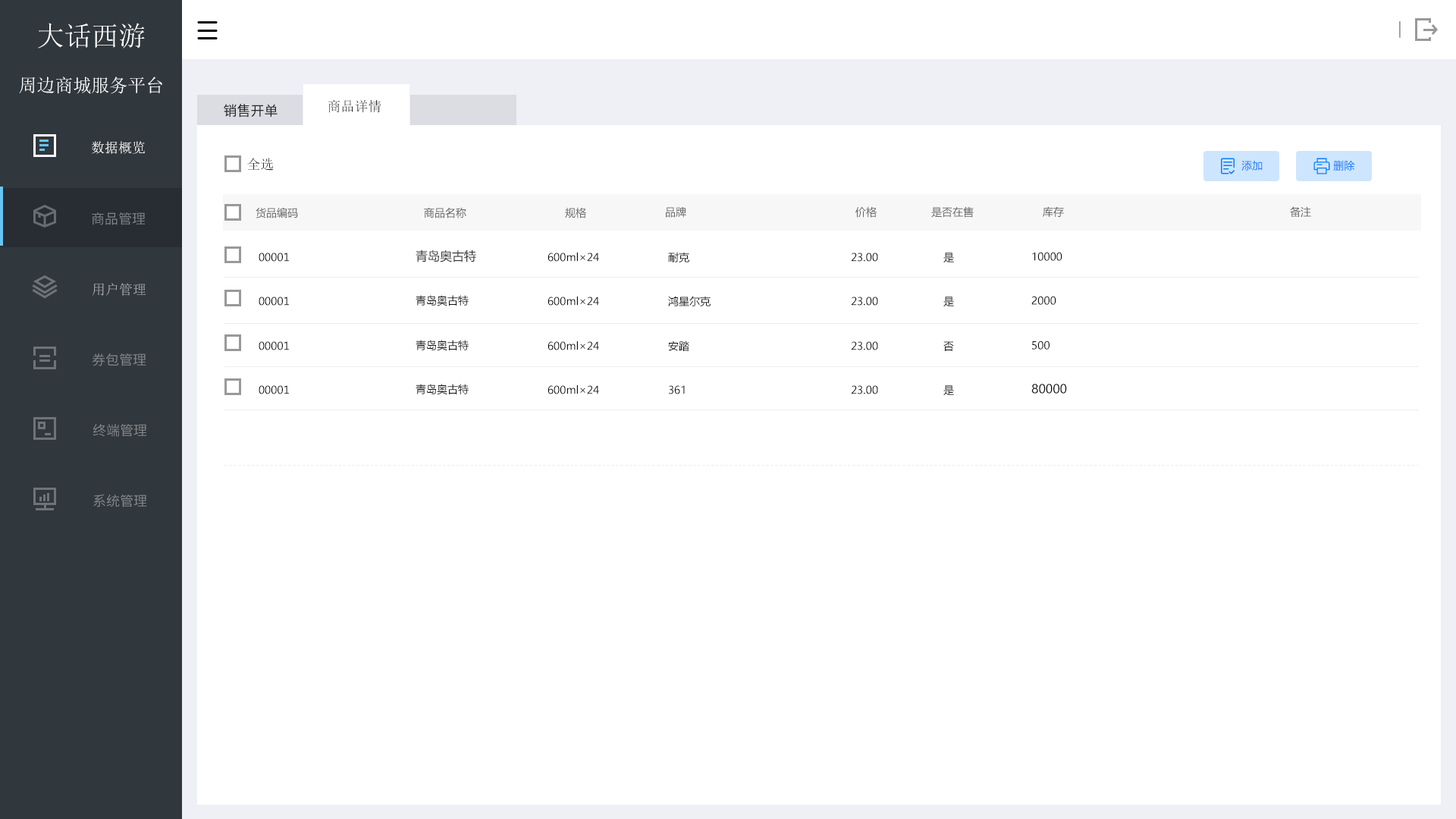
<style>
.page{position:relative;width:1456px;height:819px;background:#ffffff}
.page>*{position:absolute;margin:0}
.t1{font:27.3px "SimSun";color:#ffffff}
.t2{font:18.2px "SourceHanSansCN-Normal";color:#999999}
.t3{font:18.2px "SimSun";color:#ffffff}
.t4{font:13.6px "SimSun";color:#282828}
.t5{font:13.6px "SourceHanSansCN-Regular";color:#282828}
.t6{font:13.6px "SimSun";color:#ffffff}
.t7{font:10.6px "MicrosoftYaHei";color:#097ff9}
.t8{font:10.6px "MicrosoftYaHei";color:#666666}
.t9{font:13.6px "SourceHanSansCN-Normal";color:#828588}
.t10{font:10.6px "MicrosoftYaHei";color:#111111}
.t11{font:12.1px "MicrosoftYaHei";color:#333333}
.t12{font:13.6px "SimSun";color:#adaeb0}
.t13{font:13.6px "SourceHanSansCN-Normal";color:#878a8d}
.t14{font:12.1px "MicrosoftYaHei";color:#111111}
</style>
<div class="page">
<p class="t1" style="left:38px;top:23px;width:107px;height:26px">大话西游</p>
<p class="t2" style="left:1399px;top:21px;width:2px;height:17px">丨</p>
<p class="t3" style="left:19px;top:77px;width:143px;height:17px">周边商城服务平台</p>
<p class="t4" style="left:328px;top:99px;width:53px;height:14px">商品详情</p>
<p class="t5" style="left:224px;top:104px;width:54px;height:14px">销售开单</p>
<p class="t6" style="left:92px;top:141px;width:53px;height:13px">数据概览</p>
<p class="t4" style="left:247px;top:158px;width:27px;height:13px">全选</p>
<p class="t7" style="left:1241px;top:160px;width:22px;height:11px">添加</p>
<p class="t7" style="left:1333px;top:160px;width:22px;height:11px">删除</p>
<p class="t8" style="left:256px;top:207px;width:42px;height:11px">货品编码</p>
<p class="t8" style="left:424px;top:207px;width:42px;height:11px">商品名称</p>
<p class="t8" style="left:565px;top:207px;width:21px;height:11px">规格</p>
<p class="t8" style="left:666px;top:206px;width:20px;height:12px">品牌</p>
<p class="t8" style="left:855px;top:206px;width:22px;height:12px">价格</p>
<p class="t8" style="left:931px;top:206px;width:43px;height:12px">是否在售</p>
<p class="t8" style="left:1043px;top:206px;width:21px;height:11px">库存</p>
<p class="t8" style="left:1290px;top:206px;width:21px;height:12px">备注</p>
<p class="t9" style="left:92px;top:212px;width:54px;height:13px">商品管理</p>
<p class="t10" style="left:259px;top:253px;width:30px;height:9px">00001</p>
<p class="t11" style="left:416px;top:249px;width:60px;height:13px">青岛奥古特</p>
<p class="t10" style="left:548px;top:253px;width:51px;height:9px">600ml×24</p>
<p class="t10" style="left:668px;top:252px;width:21px;height:10px">耐克</p>
<p class="t10" style="left:851px;top:253px;width:27px;height:9px">23.00</p>
<p class="t10" style="left:943px;top:253px;width:11px;height:10px">是</p>
<p class="t10" style="left:1032px;top:252px;width:30px;height:9px">10000</p>
<p class="t12" style="left:92px;top:283px;width:54px;height:13px">用户管理</p>
<p class="t10" style="left:259px;top:297px;width:30px;height:9px">00001</p>
<p class="t10" style="left:416px;top:295px;width:53px;height:11px">青岛奥古特</p>
<p class="t10" style="left:548px;top:297px;width:51px;height:9px">600ml×24</p>
<p class="t10" style="left:668px;top:296px;width:43px;height:10px">鸿星尔克</p>
<p class="t10" style="left:851px;top:297px;width:27px;height:9px">23.00</p>
<p class="t10" style="left:943px;top:297px;width:11px;height:10px">是</p>
<p class="t10" style="left:1031px;top:296px;width:25px;height:9px">2000</p>
<p class="t10" style="left:259px;top:341px;width:30px;height:9px">00001</p>
<p class="t10" style="left:416px;top:340px;width:53px;height:11px">青岛奥古特</p>
<p class="t10" style="left:548px;top:341px;width:51px;height:9px">600ml×24</p>
<p class="t10" style="left:668px;top:340px;width:21px;height:11px">安踏</p>
<p class="t10" style="left:851px;top:341px;width:27px;height:9px">23.00</p>
<p class="t10" style="left:943px;top:341px;width:11px;height:10px">否</p>
<p class="t10" style="left:1032px;top:340px;width:18px;height:10px">500</p>
<p class="t13" style="left:92px;top:353px;width:54px;height:13px">券包管理</p>
<p class="t10" style="left:259px;top:385px;width:30px;height:9px">00001</p>
<p class="t10" style="left:416px;top:384px;width:53px;height:11px">青岛奥古特</p>
<p class="t10" style="left:548px;top:385px;width:51px;height:9px">600ml×24</p>
<p class="t10" style="left:669px;top:385px;width:16px;height:9px">361</p>
<p class="t10" style="left:851px;top:385px;width:27px;height:9px">23.00</p>
<p class="t10" style="left:943px;top:385px;width:11px;height:11px">是</p>
<p class="t14" style="left:1031px;top:384px;width:36px;height:10px">80000</p>
<p class="t13" style="left:93px;top:424px;width:54px;height:13px">终端管理</p>
<p class="t13" style="left:93px;top:494px;width:54px;height:13px">系统管理</p>
</div>
